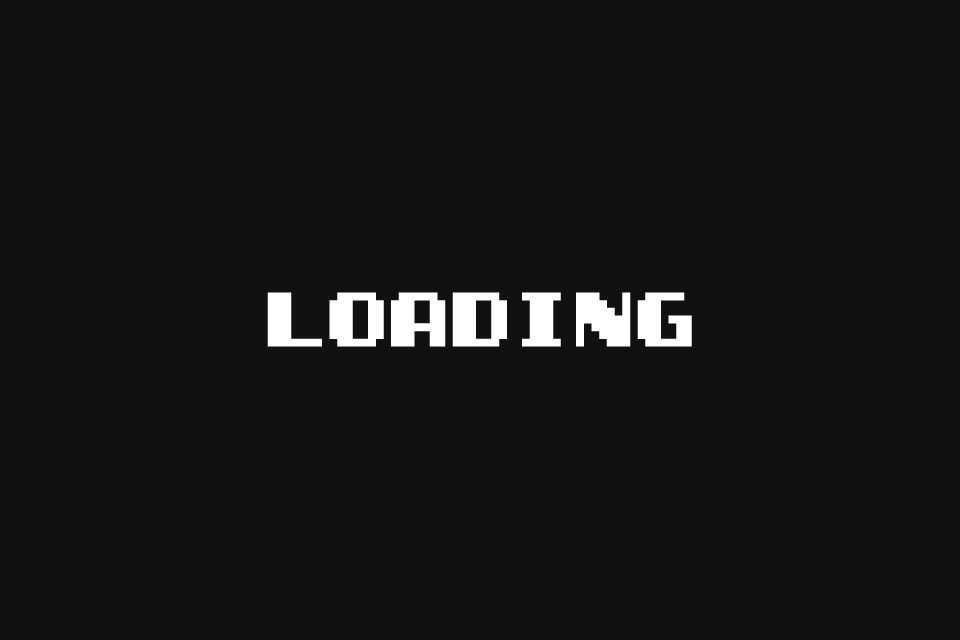
<style>
.page{position:relative;width:960px;height:640px;background:#111111}
.page>*{position:absolute;margin:0}
.t1{font:61.6px "G7-Star-Force-TTF";color:#ffffff}
</style>
<div class="page">
<p class="t1" style="left:267px;top:292px;width:425px;height:55px">LOADING</p>
</div>
